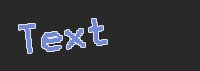
<style>
.page{position:relative;width:200px;height:71px;background:#292929}
.page>*{position:absolute;margin:0}
.t1{font:33.3px "Terminal";color:#7289da}
</style>
<div class="page">
<p class="t1" style="left:19px;top:19px;width:88px;height:34px;rotate:-6deg">Text</p>
</div>
